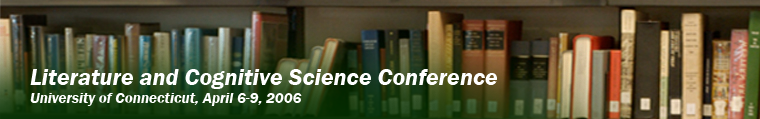
<style>
.page{position:relative;width:760px;height:119px}
.page>*{position:absolute;margin:0}
.t1{font:24px "FranklinGothic-DemiItalic";color:#ffffff}
.t2{font:15px "FranklinGothic-DemiItalic";color:#ffffff}
</style>
<div class="page">
<p class="t1" style="left:30px;top:69px;width:467px;height:37px">Literature and Cognitive Science Conference<br><span class="t2">University of Connecticut, April 6-9, 2006</span></p>
</div>
